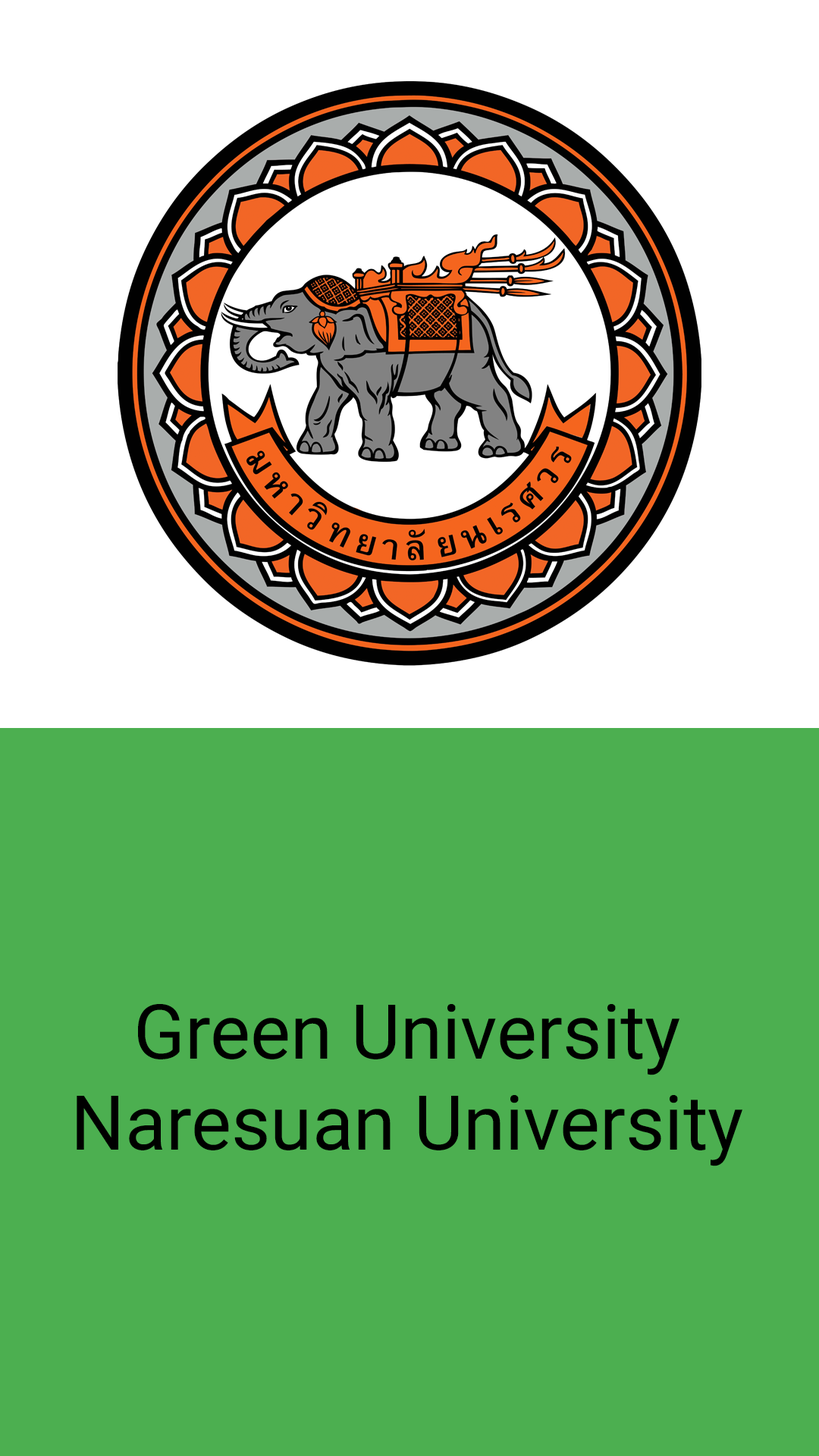
<style>
.page{position:relative;width:819px;height:1456px;background:#4caf50}
.page>*{position:absolute;margin:0}
.t1{font:75.8px "Roboto-Regular";color:#000000}
</style>
<div class="page">
<p class="t1" style="left:77px;top:1004px;width:665px;height:162px;text-align:center">Green University<br>Naresuan University</p>
</div>
